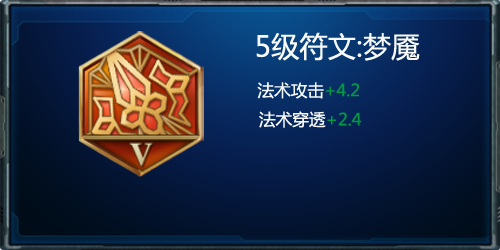
<style>
.page{position:relative;width:500px;height:250px}
.page>*{position:absolute;margin:0}
.t1{font:28.3px "MicrosoftYaHei";color:#f7faf8}
.t2{font:16.7px "MicrosoftYaHei";color:#f7faf8}
.t3{font:16.7px "MicrosoftYaHei";color:#009944}
</style>
<div class="page">
<p class="t1" style="left:256px;top:32px;width:164px;height:96px;text-align:center">5级符文:梦魇<br><span class="t2">        法术攻击</span><span class="t3">+4.2<br></span><span class="t2">  法术穿透</span><span class="t3">+2.4</span></p>
</div>
